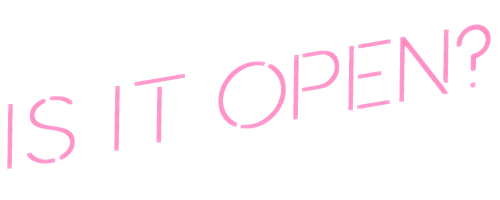
<style>
.page{position:relative;width:500px;height:200px;background:#ffffff}
.page>*{position:absolute;margin:0}
.t1{font:90.1px "NEONLIGHTS";color:#fd81b8;font-weight:bold}
.t2{font:90.1px "Moon-Light";color:#fd81b8}
</style>
<div class="page">
<p class="t1" style="left:7px;top:24px;width:484px;height:145px;rotate:-10deg">IS IT OPEN<span class="t2">?</span></p>
</div>
